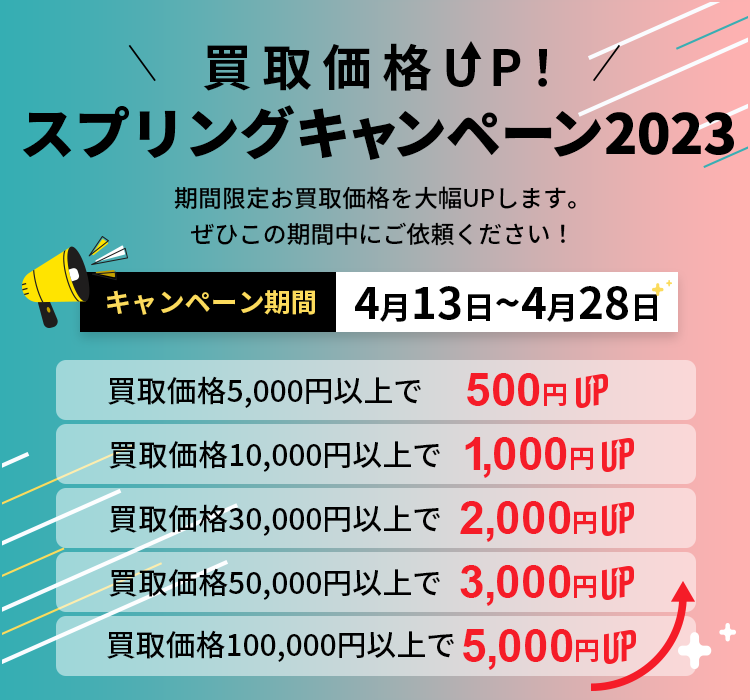
<style>
.page{position:relative;width:750px;height:700px}
.page>*{position:absolute;margin:0}
.t1{font:50px "NotoSansCJKjp-Bold";letter-spacing:0.2em;color:#000000}
.t2{font:55px "NotoSansCJKjp-Black";color:#000000}
.t3{font:24px/36px "NotoSansCJKjp-Medium";color:#000000}
.t4{font:26.6px "NotoSansCJKjp-Bold";color:#f8db4e}
.t5{font:44.1px "NotoSansCJKjp-Bold";color:#000000}
.t6{font:31.5px "NotoSansCJKjp-Bold";color:#000000}
.t7{font:30px "NotoSansCJKjp-Medium";color:#000000}
.t8{font:46px "Arial-BoldMT";color:#f51c28}
.t9{font:26px "NotoSansCJKjp-Bold";color:#f51c28}
</style>
<div class="page">
<p class="t1" style="left:203px;top:43px;width:344px;height:48px">買取価格UP！</p>
<p class="t2" style="left:23px;top:105px;width:711px;height:55px">スプリングキャンペーン2023</p>
<p class="t3" style="left:174px;top:186px;width:402px;height:60px;text-align:center">期間限定お買取価格を大幅UPします。<br>ぜひこの期間中にご依頼ください！</p>
<p class="t4" style="left:107px;top:290px;width:208px;height:25px">キャンペーン期間</p>
<p class="t5" style="left:355px;top:286px;width:302px;height:36px">4<span class="t6">月</span>13<span class="t6">日</span>~4<span class="t6">月</span>28<span class="t6">日</span></p>
<p class="t7" style="left:108px;top:376px;width:313px;height:32px">買取価格5,000円以上で</p>
<p class="t8" style="left:467px;top:373px;width:99px;height:33px">500<span class="t9">円</span></p>
<p class="t8" style="left:465px;top:437px;width:128px;height:41px">1,000<span class="t9">円</span></p>
<p class="t7" style="left:109px;top:440px;width:331px;height:32px">買取価格10,000円以上で</p>
<p class="t7" style="left:109px;top:504px;width:331px;height:32px">買取価格30,000円以上で</p>
<p class="t8" style="left:460px;top:501px;width:136px;height:41px">2,000<span class="t9">円</span></p>
<p class="t7" style="left:109px;top:568px;width:331px;height:32px">買取価格50,000円以上で</p>
<p class="t8" style="left:460px;top:565px;width:136px;height:41px">3,000<span class="t9">円</span></p>
<p class="t7" style="left:107px;top:630px;width:347px;height:32px">買取価格100,000円以上で</p>
<p class="t8" style="left:463px;top:629px;width:135px;height:41px">5,000<span class="t9">円</span></p>
</div>
